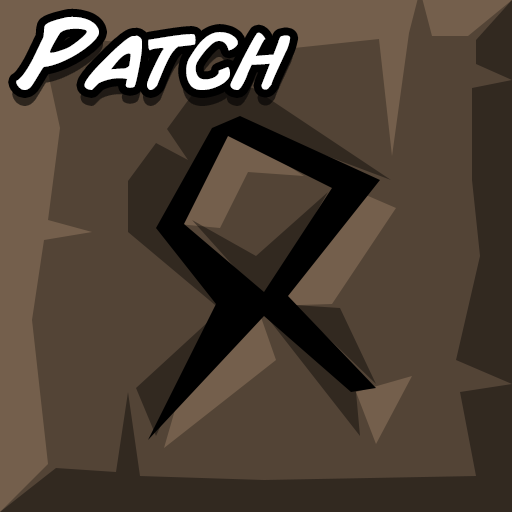
<style>
.page{position:relative;width:512px;height:512px;background:#534436}
.page>*{position:absolute;margin:0}
.t1{font:97.1px "ComicBook-Italic";letter-spacing:-0.04em;color:#ffffff}
</style>
<div class="page">
<p class="t1" style="left:16px;top:16px;width:275px;height:74px">Patch</p>
</div>
